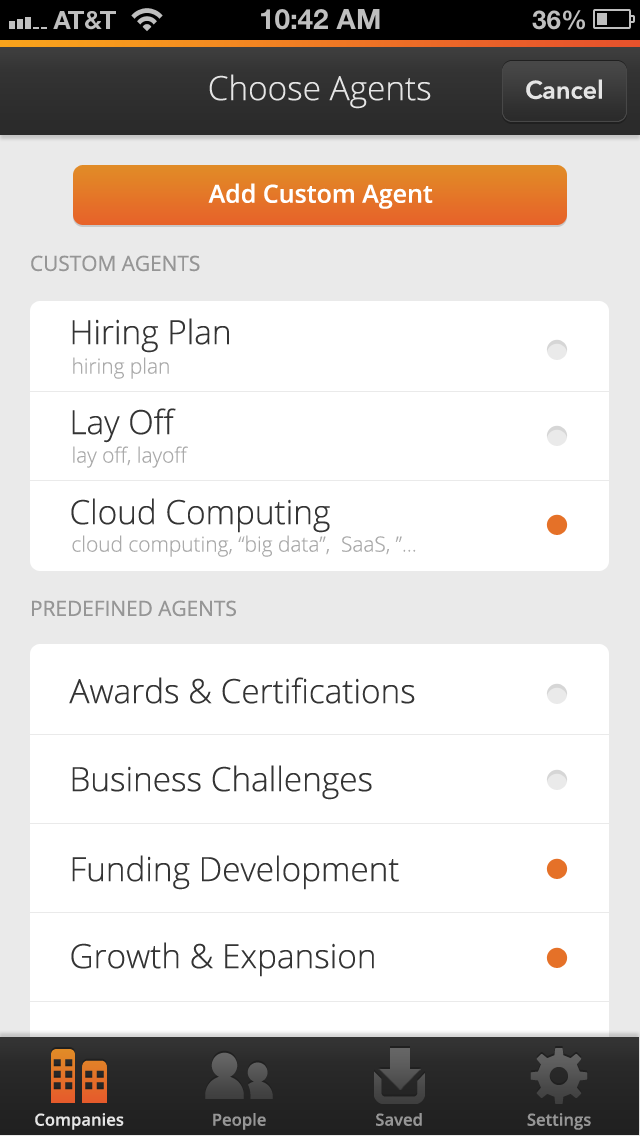
<style>
.page{position:relative;width:640px;height:1136px;background:#ffffff}
.page>*{position:absolute;margin:0}
.t1{font:33.3px "OpenSans-Light";color:#e5e5e5}
.t2{font:25px "AvenirNext-DemiBold";color:#e5e5e5}
.t3{font:25px "OpenSans-Semibold";color:#ffffff}
.t4{font:20.8px "OpenSans";color:#969696}
.t5{font:33.3px "OpenSans-Light";color:#343434}
.t6{font:20.8px "OpenSans-Light";color:#aaaaaa}
.t7{font:16.7px "OpenSans-Semibold";color:#e5e5e5}
.t8{font:16.7px "OpenSans-Semibold";color:#969696}
</style>
<div class="page">
<p class="t1" style="left:209px;top:74px;width:222px;height:35px">Choose Agents</p>
<p class="t2" style="left:526px;top:79px;width:76px;height:21px">Cancel</p>
<p class="t3" style="left:208px;top:183px;width:225px;height:26px">Add Custom Agent</p>
<p class="t4" style="left:31px;top:255px;width:169px;height:17px">CUSTOM AGENTS</p>
<p class="t5" style="left:72px;top:318px;width:157px;height:35px">Hiring Plan</p>
<p class="t6" style="left:73px;top:357px;width:96px;height:22px">hiring plan</p>
<p class="t5" style="left:72px;top:408px;width:104px;height:35px">Lay Off</p>
<p class="t6" style="left:73px;top:446px;width:115px;height:22px">lay off, layoff</p>
<p class="t5" style="left:71px;top:498px;width:259px;height:35px">Cloud Computing</p>
<p class="t6" style="left:72px;top:535px;width:344px;height:22px">cloud computing, “big data”,  SaaS, ”...</p>
<p class="t4" style="left:32px;top:600px;width:204px;height:17px">PREDEFINED AGENTS</p>
<p class="t5" style="left:69px;top:677px;width:346px;height:27px">Awards &amp; Certifications</p>
<p class="t5" style="left:72px;top:765px;width:300px;height:35px">Business Challenges</p>
<p class="t5" style="left:72px;top:855px;width:327px;height:35px">Funding Development</p>
<p class="t5" style="left:71px;top:942px;width:303px;height:35px">Growth &amp; Expansion</p>
<p class="t7" style="left:35px;top:1113px;width:89px;height:17px">Companies</p>
<p class="t8" style="left:213px;top:1113px;width:53px;height:17px">People</p>
<p class="t8" style="left:376px;top:1113px;width:46px;height:13px">Saved</p>
<p class="t8" style="left:527px;top:1113px;width:64px;height:17px">Settings</p>
</div>
